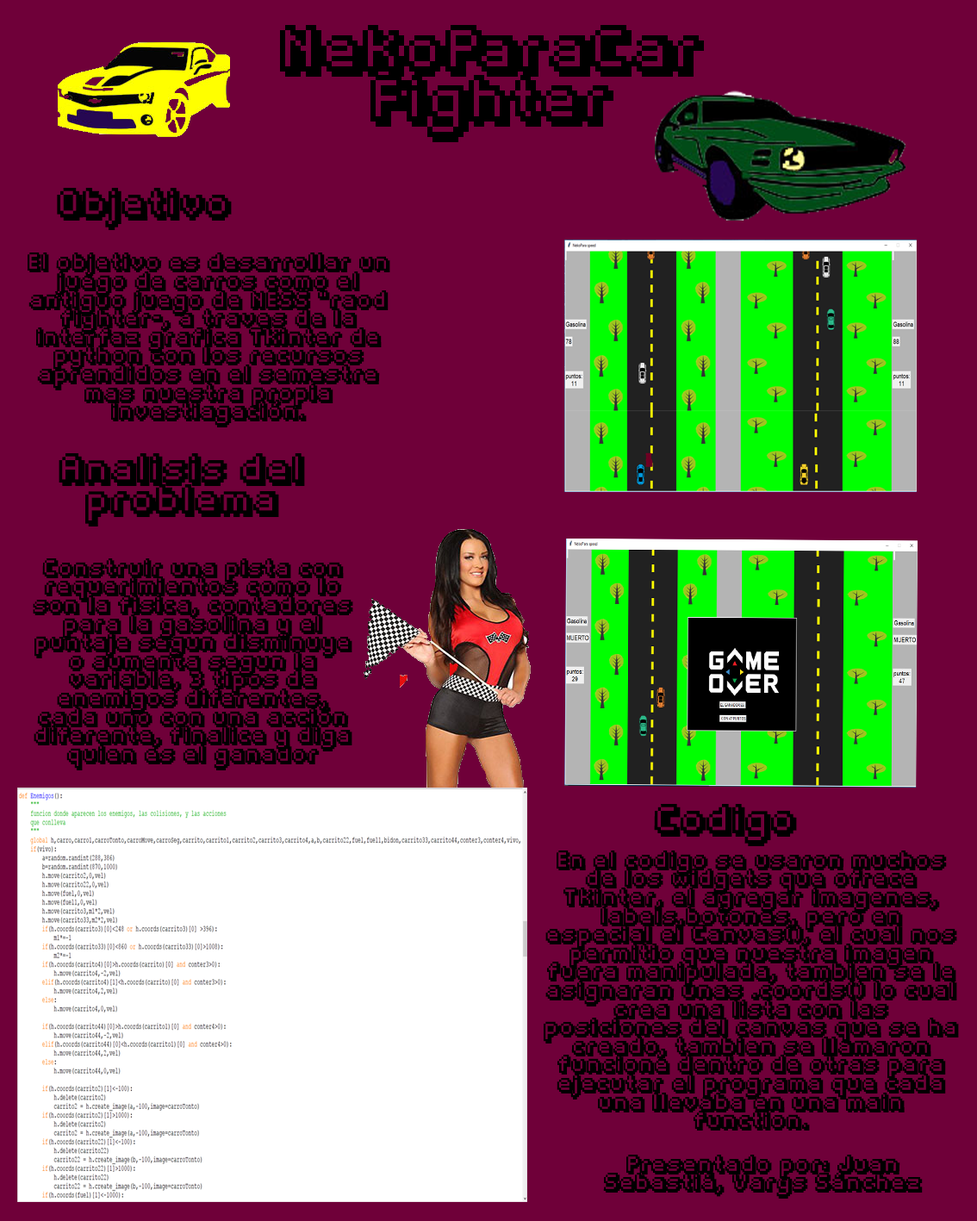
<style>
.page{position:relative;width:977px;height:1221px;background:#6f0039}
.page>*{position:absolute;margin:0}
.t1{font:41.3px "Fipps-Regular";color:#000000}
.t2{font:25.8px "Fipps-Regular";color:#000000}
.t3{font:15.5px "Fipps-Regular";color:#000000}
</style>
<div class="page">
<p class="t1" style="left:280px;top:25px;width:424px;height:117px;text-align:center">NekoParaCar Fighter</p>
<p class="t2" style="left:57px;top:188px;width:175px;height:42px">Objetivo</p>
<p class="t3" style="left:28px;top:252px;width:362px;height:175px;text-align:center">El objetivo es desarrollar un juego de carros como el antiguo juego de NESS “raod fighter-, a traves de la interfaz grafica Tkinter de python con los recursos aprendidos en el semestre mas nuestra propia investiagación.</p>
<p class="t2" style="left:59px;top:453px;width:246px;height:73px;text-align:center">Analisis del problema</p>
<p class="t3" style="left:33px;top:558px;width:320px;height:212px;text-align:center">Construir una pista con requerimientos como lo son la fisica, contadores para la gasolina y el puntaje segun disminuye o aumenta segun la variable, 3 tipos de enemigos diferentes, cada uno con una acción diferente, finalice y diga quien es el ganador</p>
<p class="t2" style="left:654px;top:804px;width:143px;height:42px">Codigo</p>
<p class="t3" style="left:544px;top:850px;width:415px;height:280px;text-align:center">En el codigo se usaron muchos de los widgets que ofrece Tkinter, el agregar imagenes, labels,botones, pero en especial el Canvas(), el cual nos permitio que nuestra imagen fuera manipulada, tambien se le asignaran unas .coords() lo cual crea una lista con las posiciones del canvas que se ha creado, tambien se llamaron funcione dentro de otras para ejecutar el programa que cada una llevaba en una main function.</p>
<p class="t3" style="left:603px;top:1154px;width:320px;height:44px;text-align:center">Presentado por: Juan Sebastiá, Vargs Sánchez</p>
</div>
